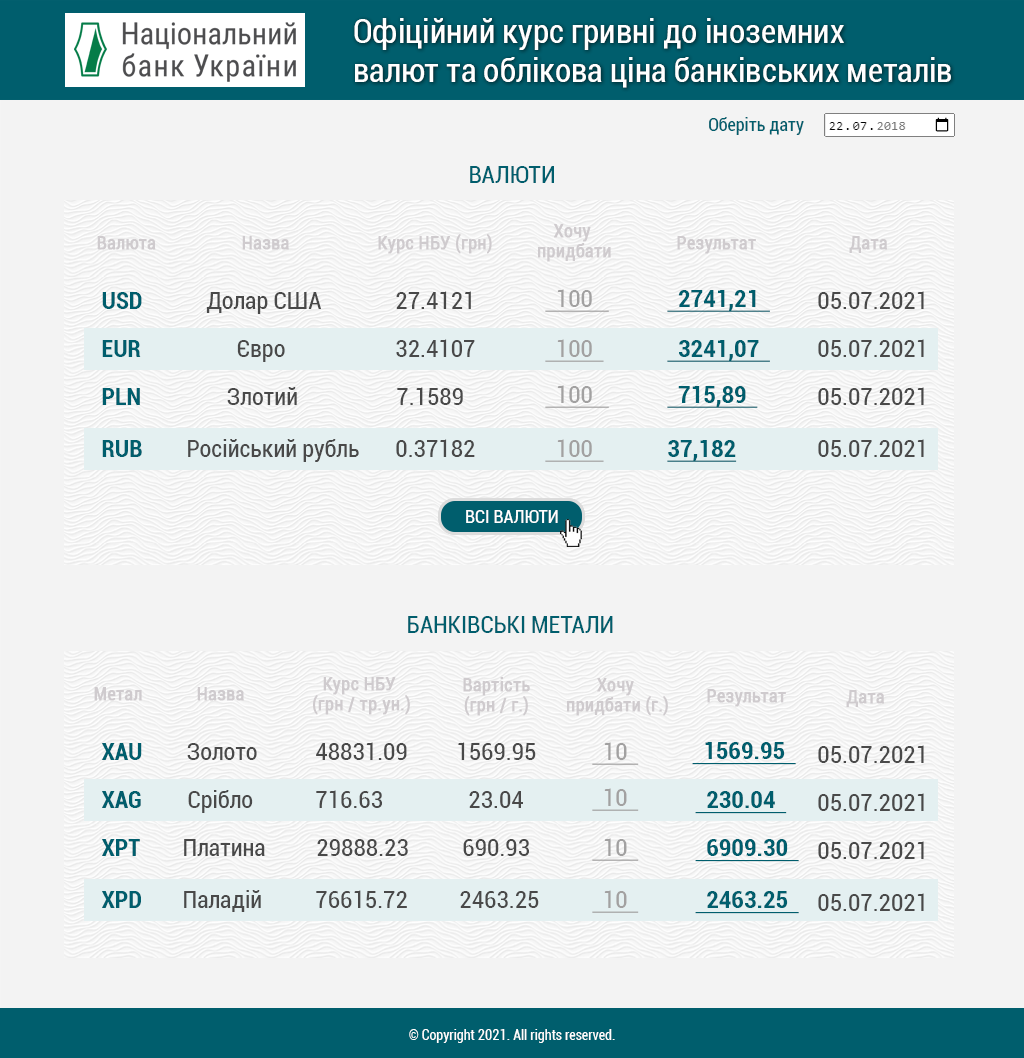
<style>
.page{position:relative;width:1024px;height:1058px;background:#f3f3f3}
.page>*{position:absolute;margin:0}
.t1{font:33px "Roboto-Condensed";color:#ffffff}
.t2{font:18px "Roboto-Condensed";color:#005e6d}
.t3{font:24px "Roboto-Condensed";color:#005e6d;text-transform:uppercase}
.t4{font:18px/20px "Roboto-Condensed";color:#cfcbce;font-weight:bold}
.t5{font:18px "Roboto-Condensed";color:#cfcbce;font-weight:bold}
.t6{font:23.9px "Roboto-BoldCondensed";color:#005e6d}
.t7{font:23.9px "Roboto-Condensed";color:#494949}
.t8{font:23.9px "Roboto-Condensed";color:#a2a1a1;text-decoration:underline}
.t9{font:23.9px "Roboto-BoldCondensed";color:#005e6d;text-decoration:underline}
.t10{font:18px "Roboto-Condensed";color:#ffffff;text-transform:uppercase}
.t11{font:14px "Roboto-Condensed";color:#ffffff}
</style>
<div class="page">
<p class="t1" style="left:354px;top:18px;width:597px;height:70px">Офіційний курс гривні до іноземних <br>валют та облікова ціна банківських металів</p>
<p class="t2" style="left:709px;top:117px;width:95px;height:18px">Оберіть дату</p>
<p class="t3" style="left:470px;top:166px;width:84px;height:17px">Валюти</p>
<p class="t4" style="left:538px;top:224px;width:73px;height:38px;text-align:center">Хочу <br>придбати</p>
<p class="t5" style="left:97px;top:236px;width:59px;height:14px">Валюта</p>
<p class="t5" style="left:242px;top:236px;width:47px;height:14px">Назва</p>
<p class="t5" style="left:378px;top:234px;width:114px;height:20px">Курс НБУ (грн)</p>
<p class="t5" style="left:677px;top:236px;width:79px;height:18px">Результат</p>
<p class="t5" style="left:849px;top:236px;width:38px;height:17px">Дата</p>
<p class="t6" style="left:102px;top:292px;width:40px;height:17px">USD</p>
<p class="t7" style="left:206px;top:292px;width:115px;height:22px">Долар США</p>
<p class="t7" style="left:396px;top:291px;width:75px;height:18px">27.4121</p>
<p class="t8" style="left:545px;top:289px;width:64px;height:23px">100</p>
<p class="t9" style="left:667px;top:290px;width:103px;height:22px">2741,21</p>
<p class="t7" style="left:818px;top:291px;width:106px;height:18px">05.07.2021</p>
<p class="t6" style="left:102px;top:340px;width:39px;height:17px">EUR</p>
<p class="t7" style="left:237px;top:340px;width:48px;height:22px">Євро</p>
<p class="t7" style="left:396px;top:339px;width:79px;height:18px">32.4107</p>
<p class="t8" style="left:545px;top:339px;width:59px;height:23px">100</p>
<p class="t9" style="left:667px;top:340px;width:103px;height:22px">3241,07</p>
<p class="t7" style="left:818px;top:339px;width:106px;height:18px">05.07.2021</p>
<p class="t6" style="left:102px;top:388px;width:38px;height:17px">PLN</p>
<p class="t7" style="left:227px;top:387px;width:70px;height:18px">Злотий</p>
<p class="t7" style="left:397px;top:387px;width:66px;height:18px">7.1589</p>
<p class="t8" style="left:545px;top:385px;width:64px;height:23px">100</p>
<p class="t9" style="left:667px;top:386px;width:91px;height:22px">715,89</p>
<p class="t7" style="left:818px;top:387px;width:106px;height:18px">05.07.2021</p>
<p class="t6" style="left:102px;top:440px;width:40px;height:17px">RUB</p>
<p class="t7" style="left:188px;top:439px;width:171px;height:23px">Російський рубль</p>
<p class="t7" style="left:396px;top:439px;width:79px;height:18px">0.37182</p>
<p class="t8" style="left:545px;top:439px;width:59px;height:23px">100</p>
<p class="t9" style="left:667px;top:440px;width:70px;height:22px">37,182</p>
<p class="t7" style="left:818px;top:439px;width:106px;height:18px">05.07.2021</p>
<p class="t10" style="left:466px;top:510px;width:92px;height:13px">Всі валюти</p>
<p class="t3" style="left:408px;top:616px;width:205px;height:17px">банківські метали</p>
<p class="t4" style="left:313px;top:677px;width:97px;height:38px;text-align:center">Курс НБУ <br>(грн / тр.ун.)</p>
<p class="t4" style="left:463px;top:677px;width:67px;height:39px;text-align:center">Вартість<br>(грн / г.)</p>
<p class="t4" style="left:567px;top:678px;width:101px;height:38px;text-align:center">Хочу <br>придбати (г.)</p>
<p class="t5" style="left:94px;top:687px;width:48px;height:14px">Метал</p>
<p class="t5" style="left:197px;top:687px;width:47px;height:14px">Назва</p>
<p class="t5" style="left:707px;top:689px;width:79px;height:18px">Результат</p>
<p class="t5" style="left:846px;top:690px;width:38px;height:17px">Дата</p>
<p class="t6" style="left:102px;top:743px;width:40px;height:17px">XAU</p>
<p class="t7" style="left:187px;top:743px;width:70px;height:17px">Золото</p>
<p class="t7" style="left:316px;top:742px;width:91px;height:18px">48831.09</p>
<p class="t7" style="left:458px;top:742px;width:78px;height:18px">1569.95</p>
<p class="t8" style="left:592px;top:742px;width:47px;height:23px">10</p>
<p class="t9" style="left:692px;top:742px;width:104px;height:23px">1569.95</p>
<p class="t7" style="left:818px;top:745px;width:106px;height:18px">05.07.2021</p>
<p class="t6" style="left:102px;top:791px;width:39px;height:17px">XAG</p>
<p class="t7" style="left:188px;top:790px;width:65px;height:23px">Срібло</p>
<p class="t7" style="left:316px;top:790px;width:66px;height:18px">716.63</p>
<p class="t7" style="left:469px;top:791px;width:54px;height:17px">23.04</p>
<p class="t8" style="left:592px;top:788px;width:47px;height:23px">10</p>
<p class="t9" style="left:695px;top:791px;width:92px;height:23px">230.04</p>
<p class="t7" style="left:818px;top:793px;width:106px;height:18px">05.07.2021</p>
<p class="t6" style="left:102px;top:839px;width:38px;height:17px">XPT</p>
<p class="t7" style="left:184px;top:839px;width:81px;height:17px">Платина</p>
<p class="t7" style="left:317px;top:839px;width:91px;height:17px">29888.23</p>
<p class="t7" style="left:463px;top:839px;width:66px;height:17px">690.93</p>
<p class="t8" style="left:592px;top:838px;width:47px;height:23px">10</p>
<p class="t9" style="left:695px;top:839px;width:104px;height:23px">6909.30</p>
<p class="t7" style="left:818px;top:841px;width:106px;height:18px">05.07.2021</p>
<p class="t6" style="left:102px;top:891px;width:39px;height:17px">XPD</p>
<p class="t7" style="left:184px;top:890px;width:77px;height:22px">Паладій</p>
<p class="t7" style="left:316px;top:890px;width:91px;height:18px">76615.72</p>
<p class="t7" style="left:460px;top:891px;width:79px;height:17px">2463.25</p>
<p class="t8" style="left:592px;top:890px;width:47px;height:23px">10</p>
<p class="t9" style="left:695px;top:891px;width:104px;height:23px">2463.25</p>
<p class="t7" style="left:818px;top:893px;width:106px;height:18px">05.07.2021</p>
<p class="t11" style="left:409px;top:1029px;width:206px;height:14px">© Copyright 2021. All rights reserved.</p>
</div>
